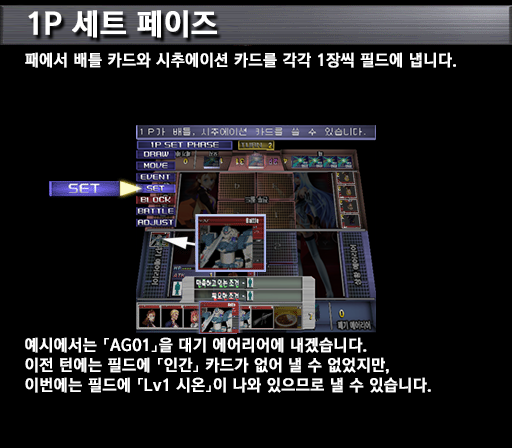
<style>
.page{position:relative;width:512px;height:448px;background:#000000}
.page>*{position:absolute;margin:0}
.t1{font:30px "KoreanGD15-R";color:#ffffff;font-weight:bold}
.t2{font:16px "KoreanGD15-R";color:#ffffff;font-weight:bold}
.t3{font:16px/20px "KoreanGD15-R";color:#ffffff;font-weight:bold}
</style>
<div class="page">
<p class="t1" style="left:28px;top:10px;width:189px;height:28px">1P 세트 페이즈</p>
<p class="t2" style="left:25px;top:52px;width:431px;height:16px">패에서 배틀 카드와 시추에이션 카드를 각각 1장씩 필드에 냅니다.</p>
<p class="t3" style="left:25px;top:337px;width:406px;height:56px">예시에서는 「AG01」을 대기 에어리어에 내겠습니다.<br>이전 턴에는 필드에 「인간」 카드가 없어 낼 수 없었지만,<br>이번에는 필드에 「Lv1 시온」이 나와 있으므로 낼 수 있습니다.</p>
</div>
